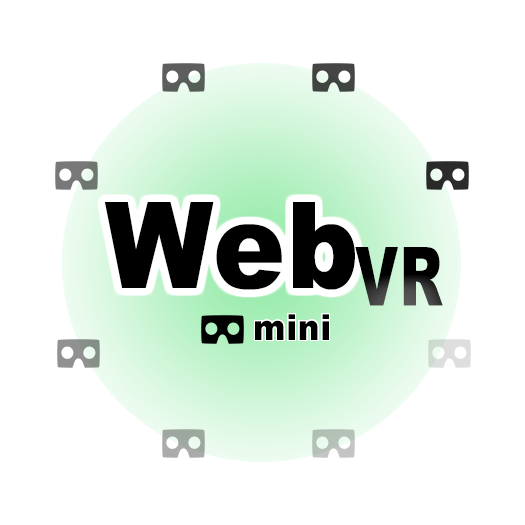
<style>
.page{position:relative;width:525px;height:525px;background:#ffffff}
.page>*{position:absolute;margin:0}
.t1{font:120px "Arial-Black";letter-spacing:0.025em;color:#000000;scale:0.9 1}
.t2{font:81.8px "Arial-Black";letter-spacing:0.025em;color:#000000;scale:0.68 1}
.t3{font:36px "Arial-Black";letter-spacing:0.025em;color:#000000;scale:0.9 1}
</style>
<div class="page">
<p class="t1" style="left:105px;top:202px;width:250px;height:88px">Web</p>
<p class="t2" style="left:355px;top:247px;width:88px;height:59px">VR</p>
<p class="t3" style="left:255px;top:314px;width:74px;height:26px">mini</p>
</div>
